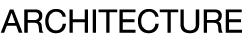
<style>
.page{position:relative;width:250px;height:36px;background:#ffffff}
.page>*{position:absolute;margin:0}
.t1{font:32.1px "HelveticaNeue";color:#000000}
</style>
<div class="page">
<p class="t1" style="left:0px;top:9px;width:242px;height:25px">ARCHITECTURE</p>
</div>
